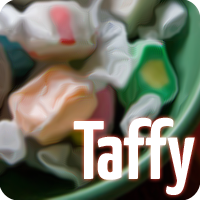
<style>
.page{position:relative;width:200px;height:200px}
.page>*{position:absolute;margin:0}
.t1{font:83px "YanoneKaffeesatz-Bold";color:#ffffff}
</style>
<div class="page">
<p class="t1" style="left:73px;top:117px;width:122px;height:78px">Taffy</p>
</div>
